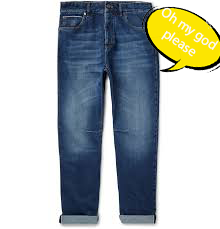
<style>
.page{position:relative;width:220px;height:229px;background:#ffffff}
.page>*{position:absolute;margin:0}
.t1{font:14px "MyriadPro-Regular";color:#fbf9f9}
</style>
<div class="page">
<p class="t1" style="left:161px;top:7px;width:58px;height:50px;text-align:center;rotate:34deg">Oh my god<br>please</p>
</div>
